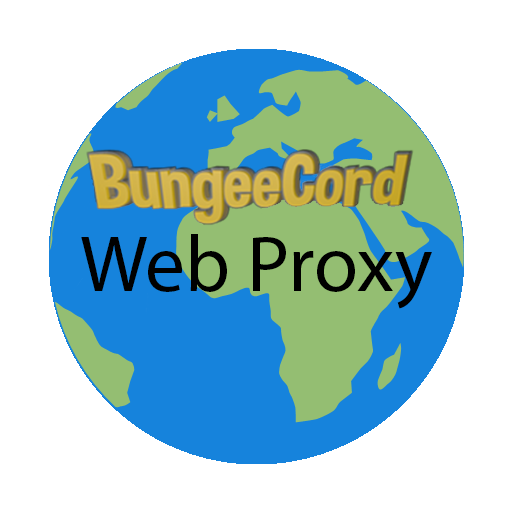
<style>
.page{position:relative;width:512px;height:512px;background:#ffffff}
.page>*{position:absolute;margin:0}
.t1{font:80px "MyriadPro-Regular";color:#000000}
</style>
<div class="page">
<p class="t1" style="left:81px;top:234px;width:351px;height:75px">Web Proxy</p>
</div>
